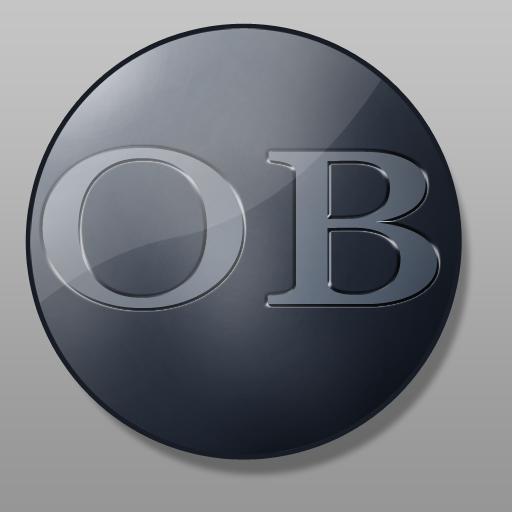
<style>
.page{position:relative;width:512px;height:512px}
.page>*{position:absolute;margin:0}
.t1{font:220px "Georgia";scale:1.37 1}
</style>
<div class="page">
<p class="t1" style="left:42px;top:147px;width:395px;height:161px">OB</p>
</div>
